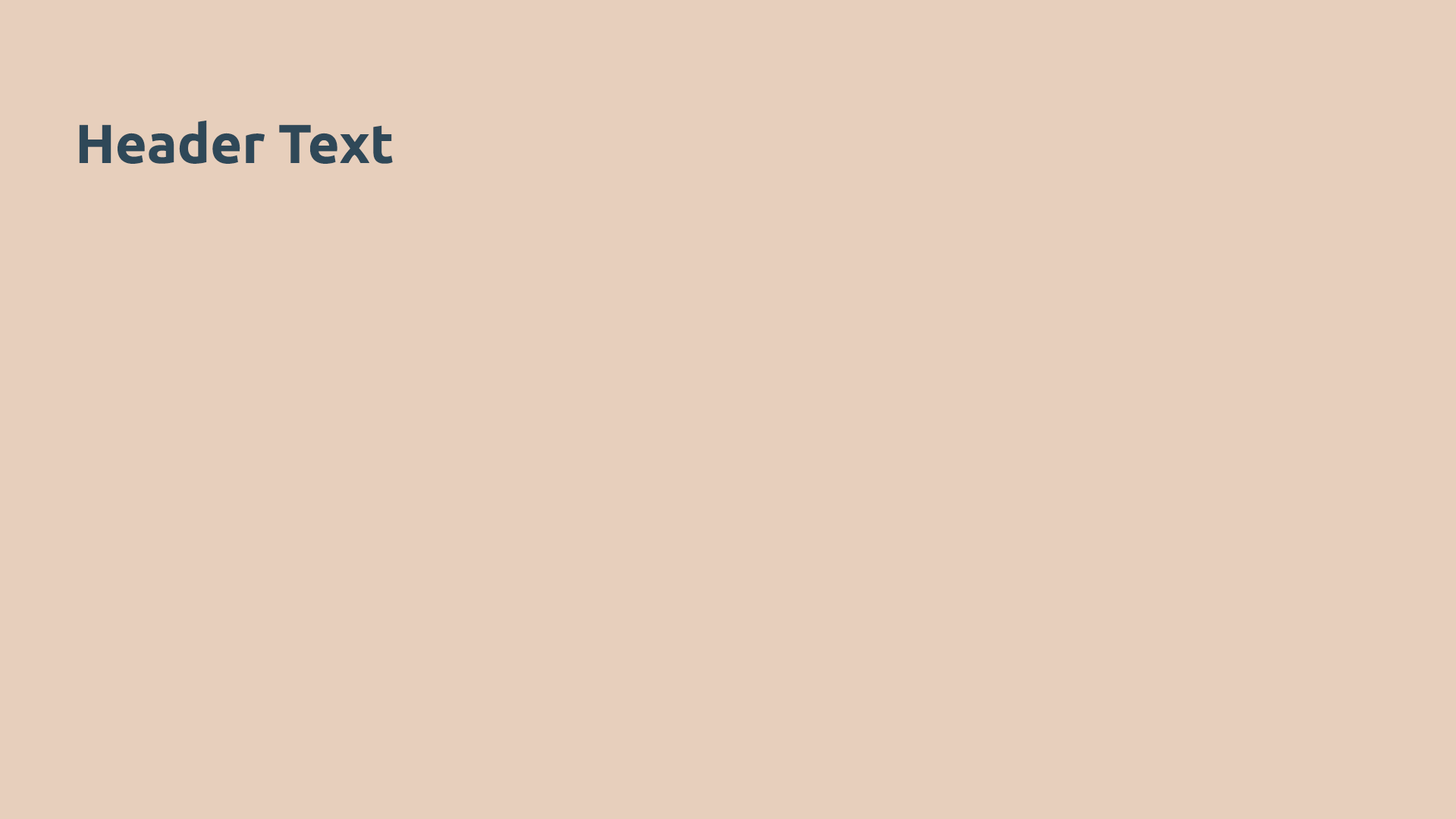
<style>
.page{position:relative;width:1456px;height:819px;background:#e7cfbc}
.page>*{position:absolute;margin:0}
.t1{font:54.6px "Ubuntu-Bold";color:#2f4858}
</style>
<div class="page">
<p class="t1" style="left:79px;top:120px;width:314px;height:44px">Header Text</p>
</div>
